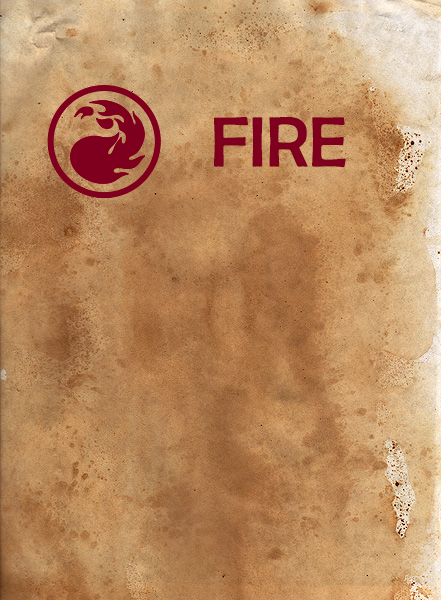
<style>
.page{position:relative;width:441px;height:600px}
.page>*{position:absolute;margin:0}
.t1{font:72px "BerlinSansFB-Reg";color:#7e001e}
</style>
<div class="page">
<p class="t1" style="left:214px;top:116px;width:132px;height:52px">FIRE</p>
</div>
